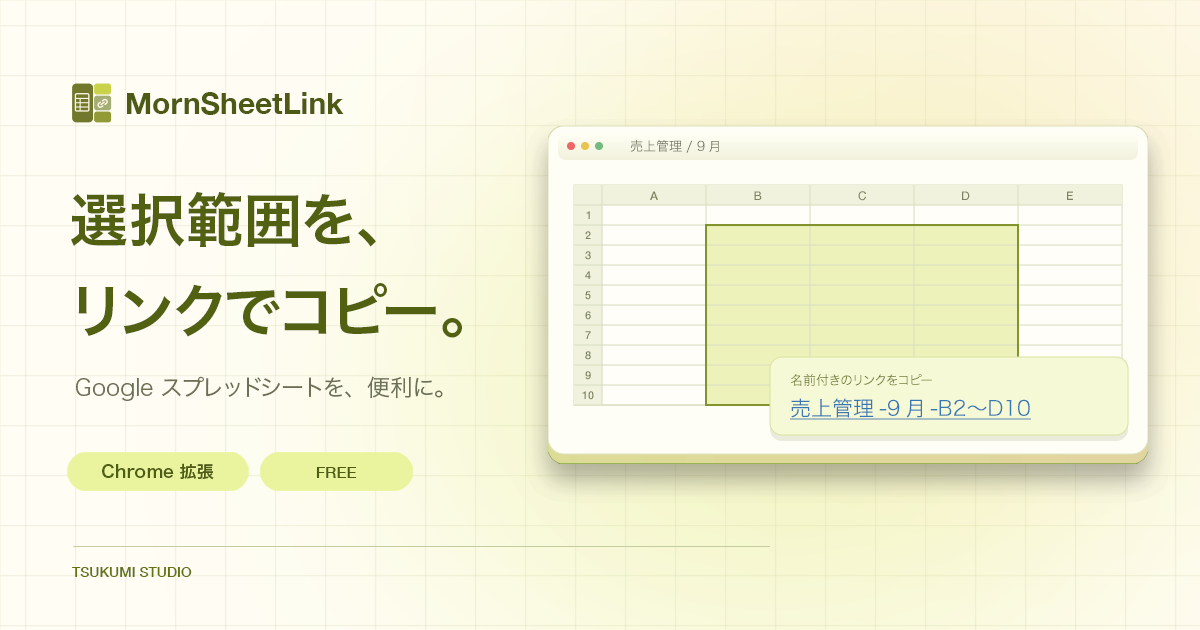
<style>
.page{position:relative;width:1200px;height:630px}
.page>*{position:absolute;margin:0}
.t1{font:30px "HelveticaNeue-Bold";color:#4c5a15}
.t2{font:13px "HiraginoSans-W3";color:#6c7057}
.t3{font:58px "HiraginoSans-W6";color:#526011}
.t4{font:12px "HelveticaNeue-Medium";color:#7c825e}
.t5{font:11px "HelveticaNeue-Medium";color:#7c825e}
.t6{font:23px "HiraginoSans-W3";color:#6c7057}
.t7{font:13px "HiraginoSans-W3";color:#697526}
.t8{font:21px "HiraginoSans-W3";color:#3677b4;text-decoration:underline}
.t9{font:17px "HiraginoSans-W6";color:#4e5c14}
.t10{font:16px "HelveticaNeue-Medium";color:#4e5c14}
.t11{font:14px "HelveticaNeue-Medium";color:#637412}
</style>
<div class="page">
<p class="t1" style="left:127px;top:92px;width:217px;height:23px">MornSheetLink</p>
<p class="t2" style="left:630px;top:140px;width:89px;height:13px">売上管理 / 9月</p>
<p class="t3" style="left:71px;top:191px;width:305px;height:56px">選択範囲を、</p>
<p class="t4" style="left:650px;top:191px;width:8px;height:9px">A</p>
<p class="t4" style="left:754px;top:191px;width:8px;height:9px">B</p>
<p class="t4" style="left:858px;top:191px;width:8px;height:10px">C</p>
<p class="t4" style="left:962px;top:191px;width:8px;height:9px">D</p>
<p class="t4" style="left:1067px;top:191px;width:6px;height:9px">E</p>
<p class="t5" style="left:586px;top:211px;width:4px;height:8px">1</p>
<p class="t5" style="left:585px;top:231px;width:6px;height:8px">2</p>
<p class="t5" style="left:585px;top:251px;width:6px;height:9px">3</p>
<p class="t5" style="left:585px;top:271px;width:6px;height:8px">4</p>
<p class="t3" style="left:78px;top:283px;width:384px;height:55px">リンクでコピー。</p>
<p class="t5" style="left:585px;top:291px;width:6px;height:9px">5</p>
<p class="t5" style="left:585px;top:311px;width:6px;height:9px">6</p>
<p class="t5" style="left:585px;top:331px;width:6px;height:8px">7</p>
<p class="t5" style="left:585px;top:351px;width:6px;height:9px">8</p>
<p class="t6" style="left:76px;top:376px;width:367px;height:25px">Google スプレッドシートを、便利に。</p>
<p class="t5" style="left:585px;top:371px;width:6px;height:9px">9</p>
<p class="t7" style="left:790px;top:374px;width:142px;height:12px">名前付きのリンクをコピー</p>
<p class="t5" style="left:582px;top:391px;width:12px;height:9px">10</p>
<p class="t8" style="left:790px;top:398px;width:241px;height:22px">売上管理-9月-B2〜D10</p>
<p class="t9" style="left:102px;top:463px;width:112px;height:17px">Chrome 拡張</p>
<p class="t10" style="left:316px;top:467px;width:41px;height:11px">FREE</p>
<p class="t11" style="left:72px;top:567px;width:120px;height:10px">TSUKUMI STUDIO</p>
</div>
